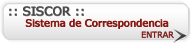
<style>
.page{position:relative;width:191px;height:43px}
.page>*{position:absolute;margin:0}
.t1{font:12px "Verdana";letter-spacing:-0.025em;color:#5a5858;font-weight:bold}
.t2{font:12px "Verdana";letter-spacing:-0.025em;color:#4b4848;font-weight:bold}
.t3{font:10px "Verdana";letter-spacing:-0.025em;color:#881811;font-weight:bold}
.t4{font:13.8px "Arrows1-Regular";color:#3f3f3f;text-transform:uppercase}
.t5{font:8px "Verdana";letter-spacing:-0.025em;color:#881811;font-weight:bold}
.t6{font:8px "Verdana";letter-spacing:-0.025em;font-weight:bold}
</style>
<div class="page">
<p class="t1" style="left:9px;top:6px;width:75px;height:11px">:: SISCOR ::</p>
<p class="t2" style="left:9px;top:6px;width:75px;height:10px">:: SISCOR ::</p>
<p class="t3" style="left:25px;top:18px;width:143px;height:11px">Sistema de Correspondencia</p>
<p class="t3" style="left:26px;top:19px;width:143px;height:10px">Sistema de Correspondencia</p>
<p class="t4" style="left:173px;top:29px;width:14px;height:14px">r</p>
<p class="t5" style="left:141px;top:31px;width:33px;height:7px">ENTRAR</p>
<p class="t6" style="left:142px;top:31px;width:32px;height:7px">ENTRAR</p>
</div>
